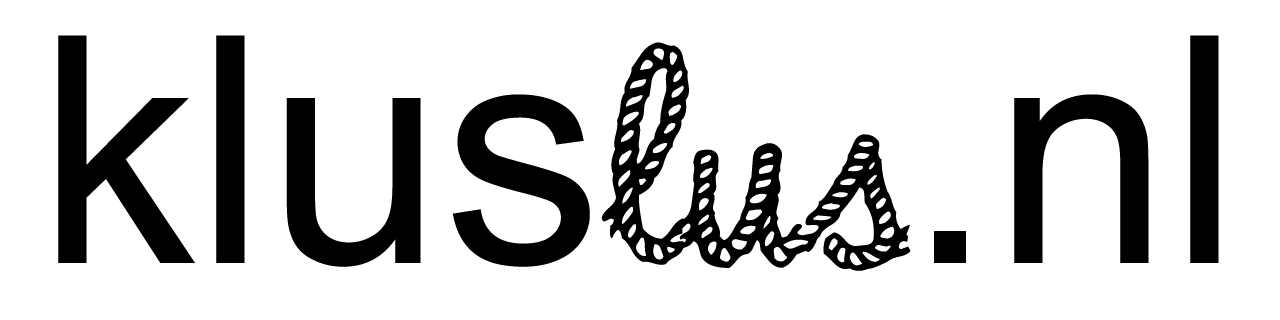
<style>
.page{position:relative;width:1280px;height:320px;background:#ffffff}
.page>*{position:absolute;margin:0}
.t1{font:317.5px "ArialMT";color:#000000}
.t2{font:352.8px "RopeMF";color:#000000}
</style>
<div class="page">
<p class="t1" style="left:58px;top:35px;width:1161px;height:236px">klus<span class="t2">lus</span>.nl</p>
</div>
